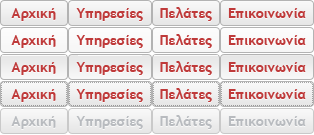
<style>
.page{position:relative;width:314px;height:135px}
.page>*{position:absolute;margin:0}
.t1{font:14.3px "TrebuchetMS-Bold";color:#bf3a3a}
.t2{font:14.3px "TrebuchetMS-Bold"}
.t3{font:14.3px "TrebuchetMS-Bold";color:#b8bbbf}
</style>
<div class="page">
<p class="t1" style="left:11px;top:8px;width:45px;height:13px">Αρχική</p>
<p class="t1" style="left:76px;top:8px;width:67px;height:13px">Υπηρεσίες</p>
<p class="t1" style="left:160px;top:7px;width:52px;height:14px">Πελάτες</p>
<p class="t1" style="left:228px;top:8px;width:78px;height:10px">Επικοινωνία</p>
<p class="t1" style="left:11px;top:35px;width:45px;height:13px">Αρχική</p>
<p class="t1" style="left:76px;top:35px;width:67px;height:13px">Υπηρεσίες</p>
<p class="t1" style="left:160px;top:34px;width:52px;height:14px">Πελάτες</p>
<p class="t1" style="left:228px;top:35px;width:78px;height:10px">Επικοινωνία</p>
<p class="t1" style="left:11px;top:62px;width:45px;height:13px">Αρχική</p>
<p class="t1" style="left:76px;top:62px;width:67px;height:13px">Υπηρεσίες</p>
<p class="t1" style="left:160px;top:61px;width:52px;height:14px">Πελάτες</p>
<p class="t1" style="left:228px;top:62px;width:78px;height:10px">Επικοινωνία</p>
<p class="t1" style="left:11px;top:89px;width:45px;height:13px">Αρχική</p>
<p class="t2" style="left:12px;top:88px;width:46px;height:11px">Default</p>
<p class="t1" style="left:76px;top:89px;width:67px;height:13px">Υπηρεσίες</p>
<p class="t1" style="left:160px;top:88px;width:52px;height:14px">Πελάτες</p>
<p class="t1" style="left:228px;top:89px;width:78px;height:10px">Επικοινωνία</p>
<p class="t3" style="left:11px;top:116px;width:45px;height:13px">Αρχική</p>
<p class="t3" style="left:76px;top:116px;width:67px;height:13px">Υπηρεσίες</p>
<p class="t3" style="left:160px;top:115px;width:52px;height:14px">Πελάτες</p>
<p class="t3" style="left:228px;top:116px;width:78px;height:10px">Επικοινωνία</p>
</div>
